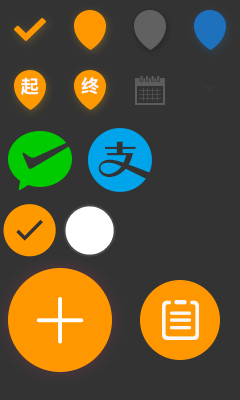
<style>
.page{position:relative;width:240px;height:400px;background:#333333}
.page>*{position:absolute;margin:0}
.t1{font:18px "NotoSansCJKsc-Bold";letter-spacing:0.01em;color:#f8f8f8}
</style>
<div class="page">
<p class="t1" style="left:21px;top:77px;width:18px;height:18px">起</p>
<p class="t1" style="left:81px;top:77px;width:18px;height:18px">终</p>
</div>
